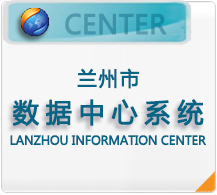
<style>
.page{position:relative;width:217px;height:195px}
.page>*{position:absolute;margin:0}
.t1{font:26.3px "MicrosoftYaHei";font-weight:bold}
.t2{font:19.7px "MicrosoftYaHei";letter-spacing:0.075em;color:#066585;font-weight:bold}
.t3{font:26.3px "MicrosoftYaHei";letter-spacing:0.25em;color:#066585;font-weight:bold}
.t4{font:12.1px "MicrosoftYaHei";letter-spacing:-0.03em;color:#066585;font-weight:bold}
</style>
<div class="page">
<p class="t1" style="left:65px;top:13px;width:102px;height:22px">CENTER</p>
<p class="t2" style="left:77px;top:68px;width:63px;height:21px">兰州市</p>
<p class="t3" style="left:12px;top:99px;width:192px;height:27px">数据中心系统</p>
<p class="t4" style="left:10px;top:135px;width:196px;height:11px">LANZHOU INFORMATION CENTER</p>
</div>
